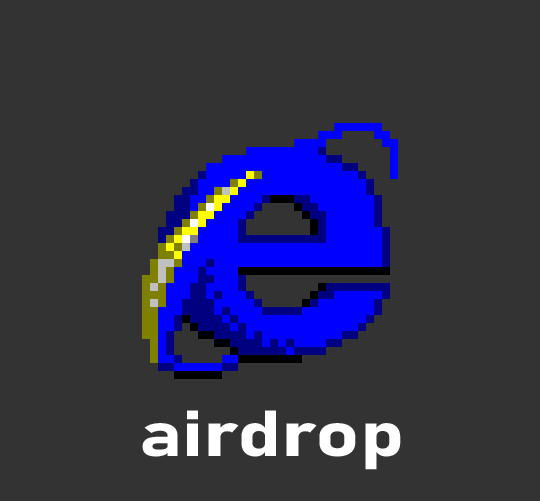
<style>
.page{position:relative;width:540px;height:501px;background:#333333}
.page>*{position:absolute;margin:0}
.t1{font:64px "Bahnschrift-Bold";color:#ffffff;scale:1.28 1}
</style>
<div class="page">
<p class="t1" style="left:142px;top:410px;width:259px;height:60px">airdrop</p>
</div>
